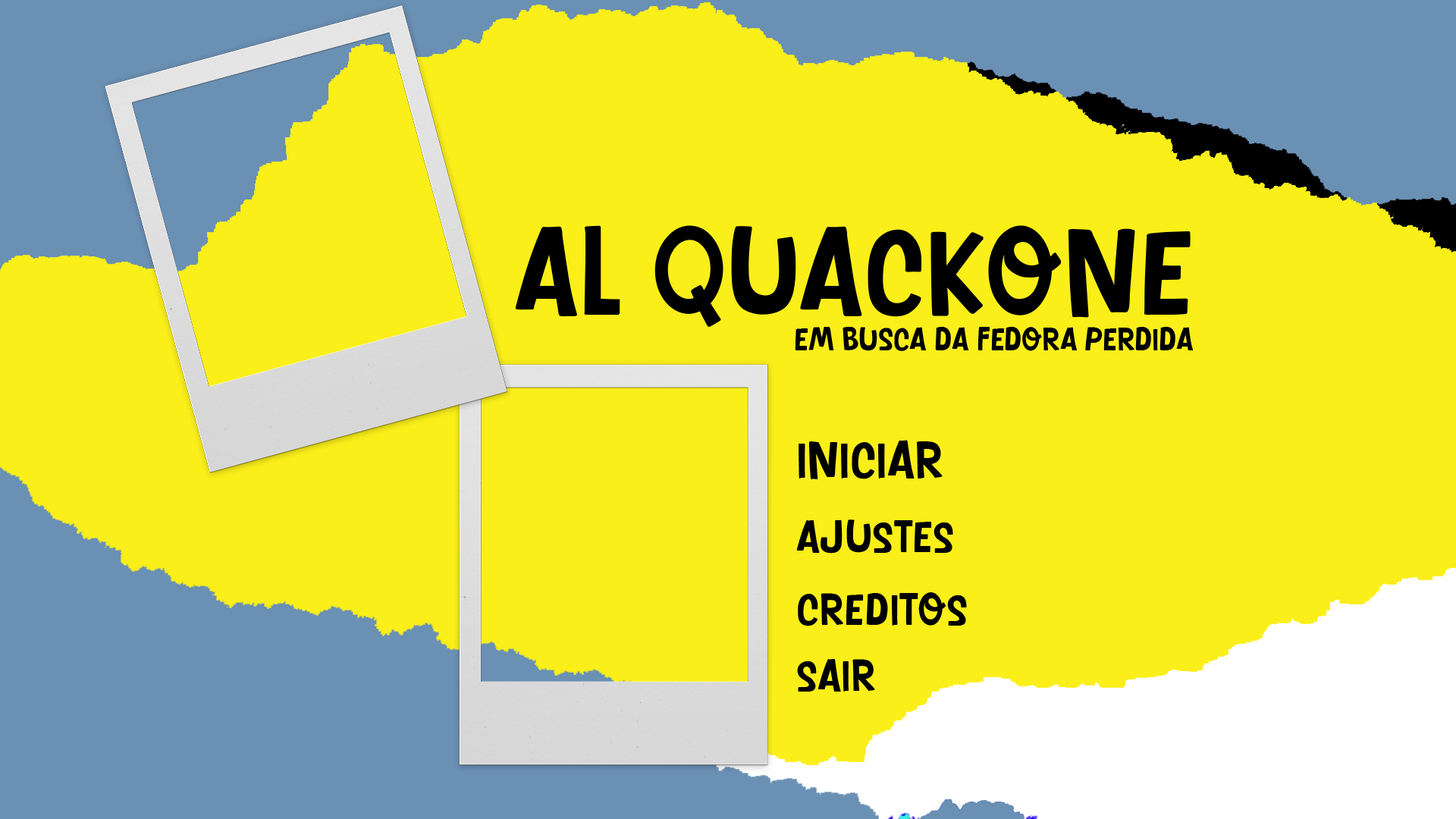
<style>
.page{position:relative;width:1456px;height:819px;background:#faef19}
.page>*{position:absolute;margin:0}
.t1{font:120.1px "Duck-Come";color:#000000}
.t2{font:31.6px "Duck-Come";color:#000000}
.t3{font:50.6px "Duck-Come";color:#000000}
.t4{font:44.2px "Duck-Come";color:#000000}
</style>
<div class="page">
<p class="t1" style="left:515px;top:225px;width:676px;height:102px">Al Quackone</p>
<p class="t2" style="left:795px;top:327px;width:399px;height:24px">em busca da fedora perdida</p>
<p class="t3" style="left:799px;top:440px;width:144px;height:39px">iniciar</p>
<p class="t4" style="left:796px;top:519px;width:157px;height:35px">AJUSTES</p>
<p class="t4" style="left:798px;top:592px;width:169px;height:34px">CREDITOS</p>
<p class="t4" style="left:797px;top:659px;width:78px;height:33px">sair</p>
</div>
